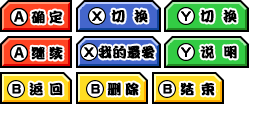
<style>
.page{position:relative;width:256px;height:128px;background:#ffffff}
.page>*{position:absolute;margin:0}
.t1{font:14px "DFPKanTingLiuW9";letter-spacing:0.2em;color:#000000;font-weight:bold}
.t2{font:14px "DFPKanTingLiuW9";letter-spacing:0.075em;color:#000000;font-weight:bold}
.t3{font:14px "DFPKanTingLiuW9";letter-spacing:-0.001em;color:#000000;font-weight:bold}
.t4{font:14px "DFPKanTingLiuW9";letter-spacing:0.1em;color:#000000;font-weight:bold}
.t5{font:14px "DFPKanTingLiuW9";letter-spacing:-0.025em;color:#000000;font-weight:bold}
.t6{font:14px "DFPKanTingLiuW9";color:#000000;font-weight:bold}
</style>
<div class="page">
<p class="t1" style="left:31px;top:10px;width:32px;height:14px">确定</p>
<p class="t2" style="left:111px;top:9px;width:37px;height:14px">切 换</p>
<p class="t2" style="left:200px;top:9px;width:37px;height:14px">切 换</p>
<p class="t1" style="left:31px;top:46px;width:32px;height:14px">继续</p>
<p class="t3" style="left:98px;top:45px;width:57px;height:14px">我的最爱</p>
<p class="t4" style="left:200px;top:45px;width:37px;height:14px">说 明</p>
<p class="t5" style="left:29px;top:82px;width:34px;height:14px">返 回</p>
<p class="t1" style="left:107px;top:82px;width:32px;height:14px">删除</p>
<p class="t6" style="left:180px;top:82px;width:35px;height:14px">结 束</p>
</div>
